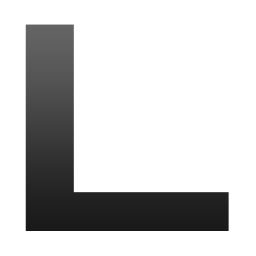
<style>
.page{position:relative;width:256px;height:256px;background:#ffffff}
.page>*{position:absolute;margin:0}
.t1{font:400px "BankGothicBold"}
</style>
<div class="page">
<p class="t1" style="left:25px;top:24px;width:204px;height:207px">L</p>
</div>
